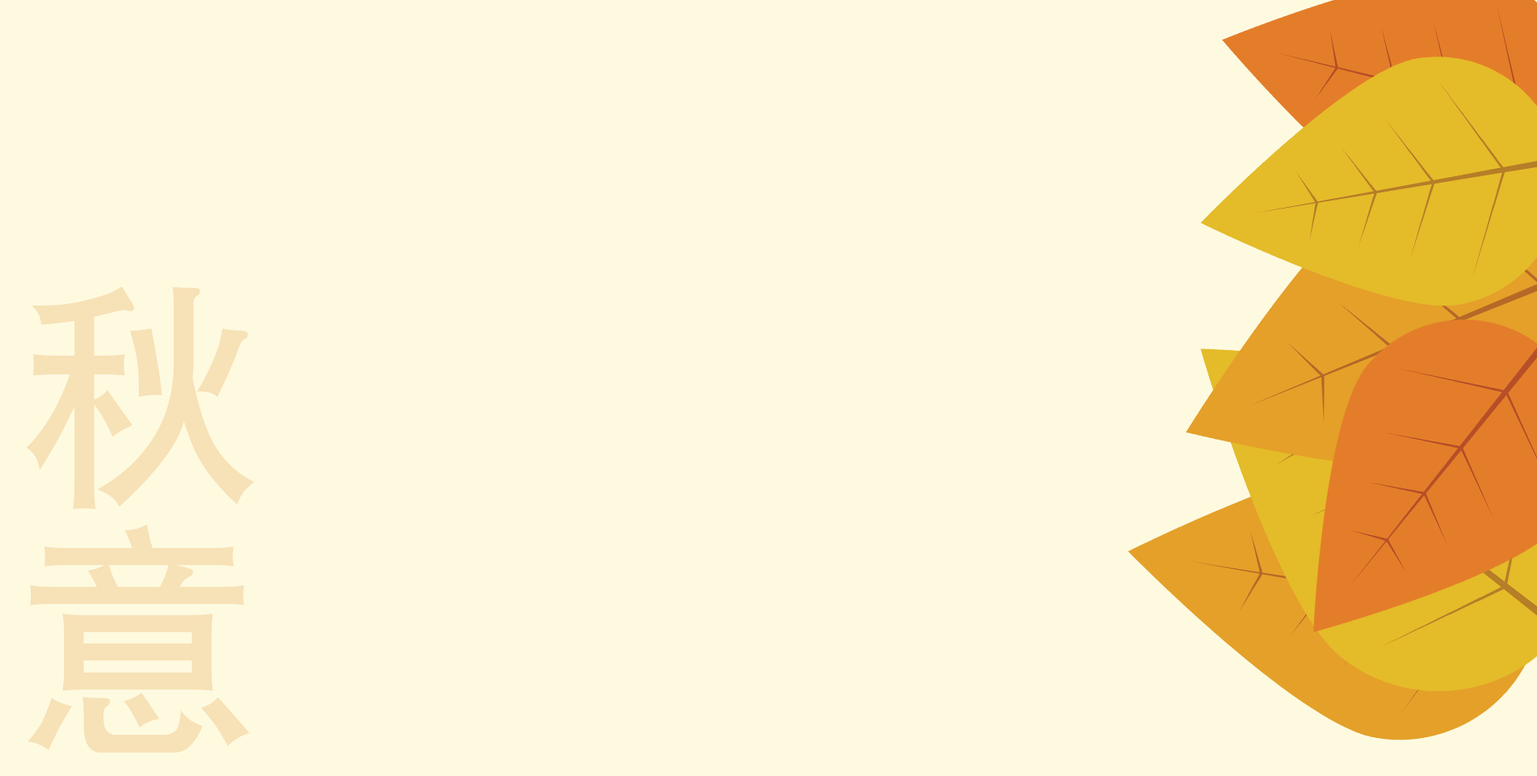
<style>
.page{position:relative;width:1537px;height:776px;background:#fefae1}
.page>*{position:absolute;margin:0}
.t1{font:242.4px "HeitiCSEG-Medium-GB";color:#f7e1b6}
</style>
<div class="page">
<p class="t1" style="left:26px;top:286px;width:228px;height:466px;text-align:center">秋意</p>
</div>
